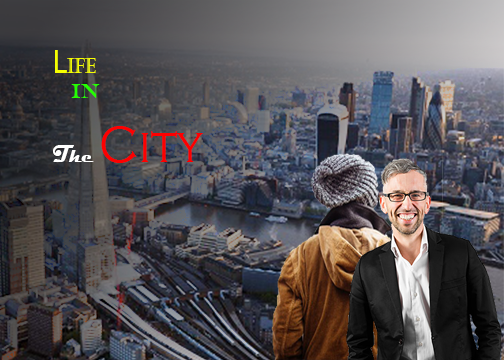
<style>
.page{position:relative;width:504px;height:360px}
.page>*{position:absolute;margin:0}
.t1{font:53.1px "CopperplateGothic-Light";color:#fe0000;scale:0.89 1}
.t2{font:31.9px "Tahoma";color:#f6ff00;scale:0.89 1}
.t3{font:21.2px "Castellar";color:#f6ff01;scale:0.89 1}
.t4{font:21.2px "EngraversMT";color:#24ff00;scale:0.89 1}
.t5{font:24.8px "Magneto-Bold";color:#ffffff;scale:0.89 1}
.t6{font:21.2px "Magneto-Bold";color:#ffffff;scale:0.89 1}
</style>
<div class="page">
<p class="t1" style="left:53px;top:50px;width:150px;height:113px"><span class="t2">L</span><span class="t3">ife <br>   </span><span class="t4">in<br></span><span class="t5">T</span><span class="t6">he </span>City</p>
</div>
